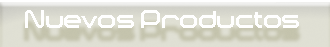
<style>
.page{position:relative;width:330px;height:47px}
.page>*{position:absolute;margin:0}
.t1{font:24px "Dekers_Bold";letter-spacing:-0.01em;color:#ffffff}
</style>
<div class="page">
<p class="t1" style="left:25px;top:10px;width:274px;height:18px">Nuevos Productos</p>
</div>
